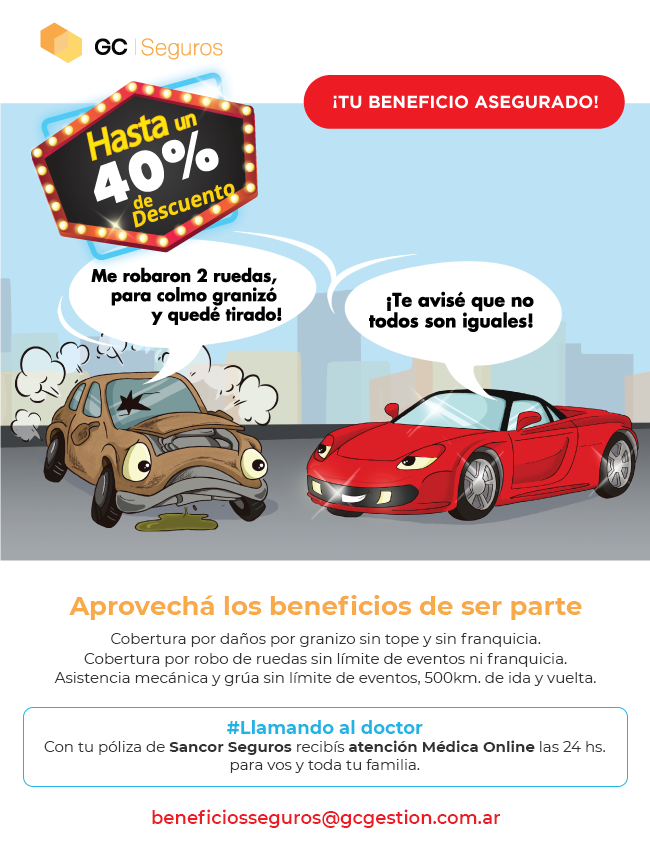
<style>
.page{position:relative;width:650px;height:854px;background:#ffffff}
.page>*{position:absolute;margin:0}
.t1{font:26px "Montserrat-Bold";color:#f8a948}
.t2{font:15px "Montserrat-Regular";color:#333333}
.t3{font:18px "Montserrat-Bold";color:#1fb4e4}
.t4{font:15px "Montserrat-Bold";color:#333333}
.t5{font:18px "Montserrat-SemiBold";color:#ed1c24}
</style>
<div class="page">
<p class="t1" style="left:69px;top:595px;width:513px;height:25px">Aprovechá los beneficios de ser parte</p>
<p class="t2" style="left:54px;top:633px;width:542px;height:53px;text-align:center">Cobertura por daños por granizo sin tope y sin franquicia.<br>Cobertura por robo de ruedas sin límite de eventos ni franquicia.<br>Asistencia mecánica y grúa sin límite de eventos, 500km. de ida y vuelta.</p>
<p class="t2" style="left:44px;top:720px;width:561px;height:53px;text-align:center"><span class="t3">#Llamando al doctor<br></span>Con tu póliza de <span class="t4">Sancor Seguros</span> recibís <span class="t4">atención Médica Online</span> las 24 hs.<br>para vos y toda tu familia.</p>
<p class="t5" style="left:152px;top:809px;width:348px;height:19px">beneficiosseguros@gcgestion.com.ar</p>
</div>
